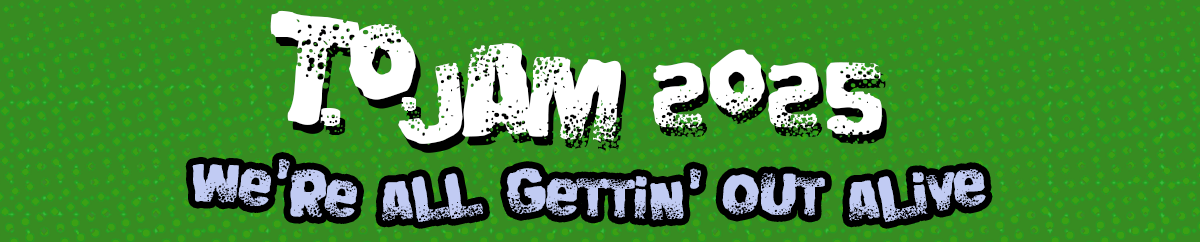
<style>
.page{position:relative;width:1200px;height:242px;background:#378c21}
.page>*{position:absolute;margin:0}
.t1{font:220.1px "BigBlokeBB";color:#ffffff}
.t2{font:165px "BigBlokeBB";color:#ffffff}
.t3{font:148.5px "BigBlokeBB";color:#ffffff}
.t4{font:128.6px "BigBlokeBB";color:#ffffff}
.t5{font:143px "BigBlokeBB";color:#ffffff}
.t6{font:99px "BigBlokeBB";color:#ffffff}
.t7{font:132px "BigBlokeBB";color:#ffffff}
.t8{font:75px "BigBlokeBB";color:#c1cbf3}
</style>
<div class="page">
<p class="t1" style="left:270px;top:10px;width:90px;height:115px">T</p>
<p class="t2" style="left:349px;top:24px;width:67px;height:76px">O</p>
<p class="t3" style="left:462px;top:43px;width:76px;height:94px">A</p>
<p class="t4" style="left:653px;top:49px;width:229px;height:86px">2025</p>
<p class="t5" style="left:398px;top:62px;width:65px;height:82px">J</p>
<p class="t3" style="left:527px;top:56px;width:94px;height:86px">M</p>
<p class="t6" style="left:401px;top:97px;width:15px;height:14px">.</p>
<p class="t7" style="left:320px;top:108px;width:21px;height:18px">.</p>
<p class="t8" style="left:192px;top:159px;width:165px;height:58px;rotate:7deg">We’re</p>
<p class="t8" style="left:382px;top:173px;width:101px;height:49px;rotate:-5deg">all</p>
<p class="t8" style="left:507px;top:168px;width:194px;height:53px;rotate:2deg">Gettin’</p>
<p class="t8" style="left:722px;top:173px;width:103px;height:43px;rotate:2deg">out</p>
<p class="t8" style="left:849px;top:169px;width:137px;height:53px;rotate:-7deg">alive</p>
</div>
